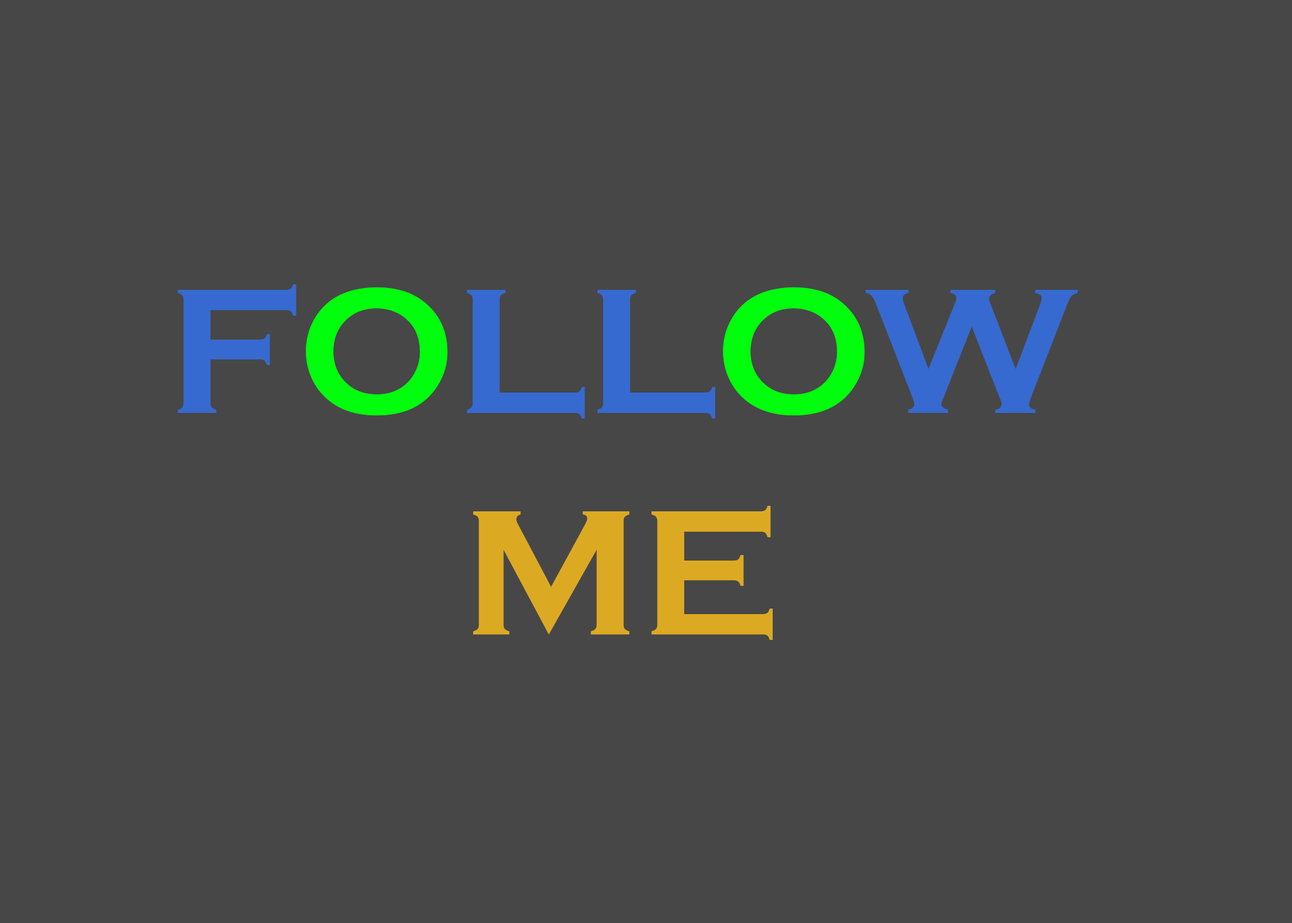
<style>
.page{position:relative;width:1292px;height:923px;background:#474747}
.page>*{position:absolute;margin:0}
.t1{font:184.6px "CopperplateGothic-Bold";color:#376ad0}
.t2{font:184.6px "CopperplateGothic-Bold";color:#00ff0c}
.t3{font:184.6px "CopperplateGothic-Bold";color:#dcaa22}
</style>
<div class="page">
<p class="t1" style="left:178px;top:284px;width:900px;height:356px;text-align:center">F<span class="t2">O</span>LL<span class="t2">O</span>W <span class="t3">ME</span></p>
</div>
